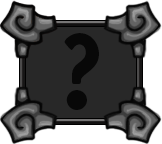
<style>
.page{position:relative;width:162px;height:144px;background:#282828}
.page>*{position:absolute;margin:0}
.t1{font:90.7px "HoboStd";color:#080808}
</style>
<div class="page">
<p class="t1" style="left:64px;top:33px;width:35px;height:77px">?</p>
</div>
